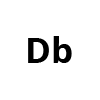
<style>
.page{position:relative;width:100px;height:100px;background:#ffffff}
.page>*{position:absolute;margin:0}
.t1{font:35px "OpenSans-Bold";color:#000000}
</style>
<div class="page">
<p class="t1" style="left:28px;top:36px;width:44px;height:27px">Db</p>
</div>
